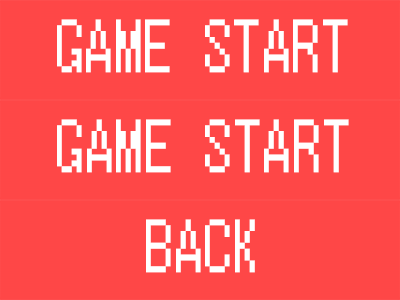
<style>
.page{position:relative;width:400px;height:300px;background:#ff4747}
.page>*{position:absolute;margin:0}
.t1{font:75px "Terminal";color:#ffffff;scale:0.84 1}
</style>
<div class="page">
<p class="t1" style="left:57px;top:19px;width:291px;height:54px">GAME START</p>
<p class="t1" style="left:57px;top:119px;width:292px;height:54px">GAME START</p>
<p class="t1" style="left:146px;top:219px;width:109px;height:54px">BACK</p>
</div>
